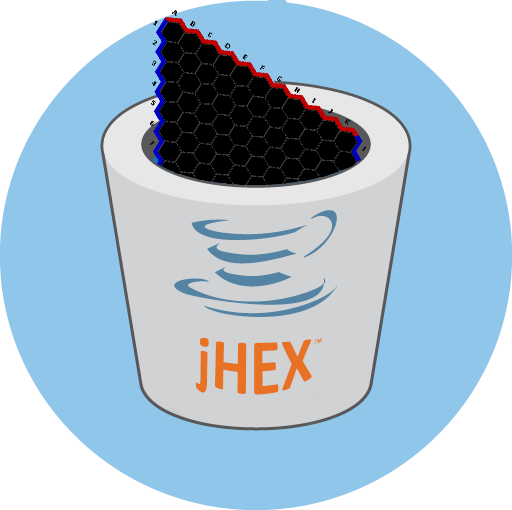
<style>
.page{position:relative;width:512px;height:510px;background:#90c6ea}
.page>*{position:absolute;margin:0}
.t1{font:60px "Calibri-Bold";color:#e77224}
</style>
<div class="page">
<p class="t1" style="left:195px;top:337px;width:117px;height:58px">jHEX</p>
</div>
